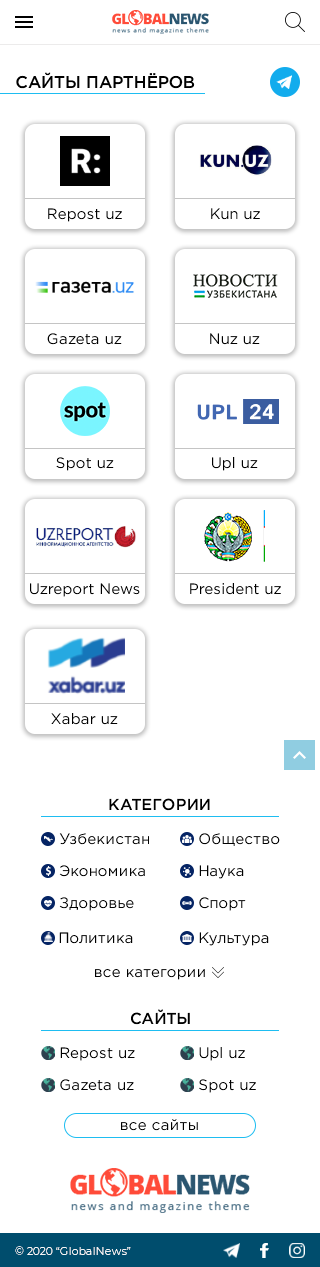
<style>
.page{position:relative;width:320px;height:1267px;background:#ffffff}
.page>*{position:absolute;margin:0}
.t1{font:17px "GothamPro-Medium";color:#000000;text-transform:uppercase}
.t2{font:15px "GothamPro";color:#000000}
.t3{font:16px "GothamPro-Medium";color:#000000;text-transform:uppercase}
.t4{font:11px "Montserrat-Regular";color:#ffffff}
</style>
<div class="page">
<p class="t1" style="left:16px;top:72px;width:179px;height:17px">Сайты партнёров</p>
<p class="t2" style="left:48px;top:208px;width:74px;height:14px">Repost uz</p>
<p class="t2" style="left:211px;top:208px;width:49px;height:12px">Kun uz</p>
<p class="t2" style="left:47px;top:333px;width:75px;height:12px">Gazeta uz</p>
<p class="t2" style="left:210px;top:333px;width:50px;height:12px">Nuz uz</p>
<p class="t2" style="left:56px;top:457px;width:58px;height:14px">Spot uz</p>
<p class="t2" style="left:212px;top:457px;width:46px;height:14px">Upl uz</p>
<p class="t2" style="left:30px;top:583px;width:110px;height:14px">Uzreport News</p>
<p class="t2" style="left:190px;top:583px;width:91px;height:12px">President uz</p>
<p class="t2" style="left:51px;top:713px;width:67px;height:12px">Xabar uz</p>
<p class="t3" style="left:109px;top:798px;width:101px;height:13px">Категории</p>
<p class="t2" style="left:59px;top:833px;width:90px;height:12px">Узбекистан</p>
<p class="t2" style="left:199px;top:833px;width:81px;height:13px">Общество</p>
<p class="t2" style="left:59px;top:865px;width:86px;height:12px">Экономика</p>
<p class="t2" style="left:199px;top:865px;width:45px;height:14px">Наука</p>
<p class="t2" style="left:59px;top:897px;width:75px;height:14px">Здоровье</p>
<p class="t2" style="left:199px;top:897px;width:47px;height:14px">Спорт</p>
<p class="t2" style="left:59px;top:932px;width:74px;height:12px">Политика</p>
<p class="t2" style="left:199px;top:932px;width:70px;height:14px">Культура</p>
<p class="t2" style="left:95px;top:969px;width:110px;height:11px">все категории</p>
<p class="t3" style="left:131px;top:1009px;width:59px;height:16px">Сайты</p>
<p class="t2" style="left:60px;top:1047px;width:75px;height:14px">Repost uz</p>
<p class="t2" style="left:199px;top:1047px;width:46px;height:14px">Upl uz</p>
<p class="t2" style="left:60px;top:1079px;width:74px;height:12px">Gazeta uz</p>
<p class="t2" style="left:199px;top:1079px;width:57px;height:14px">Spot uz</p>
<p class="t2" style="left:121px;top:1119px;width:77px;height:12px">все сайты</p>
<p class="t4" style="left:15px;top:1246px;width:116px;height:9px">© 2020 “GlobalNews”</p>
</div>
